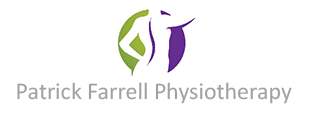
<style>
.page{position:relative;width:312px;height:120px;background:#ffffff}
.page>*{position:absolute;margin:0}
.t1{font:24.1px "Calibri";color:#a1a1a1}
</style>
<div class="page">
<p class="t1" style="left:17px;top:82px;width:275px;height:22px">Patrick Farrell Physiotherapy</p>
</div>
